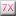
<style>
.page{position:relative;width:16px;height:16px}
.page>*{position:absolute;margin:0}
.t1{font:9.3px "Verdana";color:#ff81ab}
</style>
<div class="page">
<p class="t1" style="left:2px;top:4px;width:12px;height:7px">7X</p>
</div>
